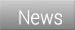
<style>
.page{position:relative;width:75px;height:30px}
.page>*{position:absolute;margin:0}
.t1{font:19.4px "Roboto-Thin";color:#ffffff;font-weight:bold;scale:0.91 1}
</style>
<div class="page">
<p class="t1" style="left:19px;top:10px;width:43px;height:15px">News</p>
</div>
